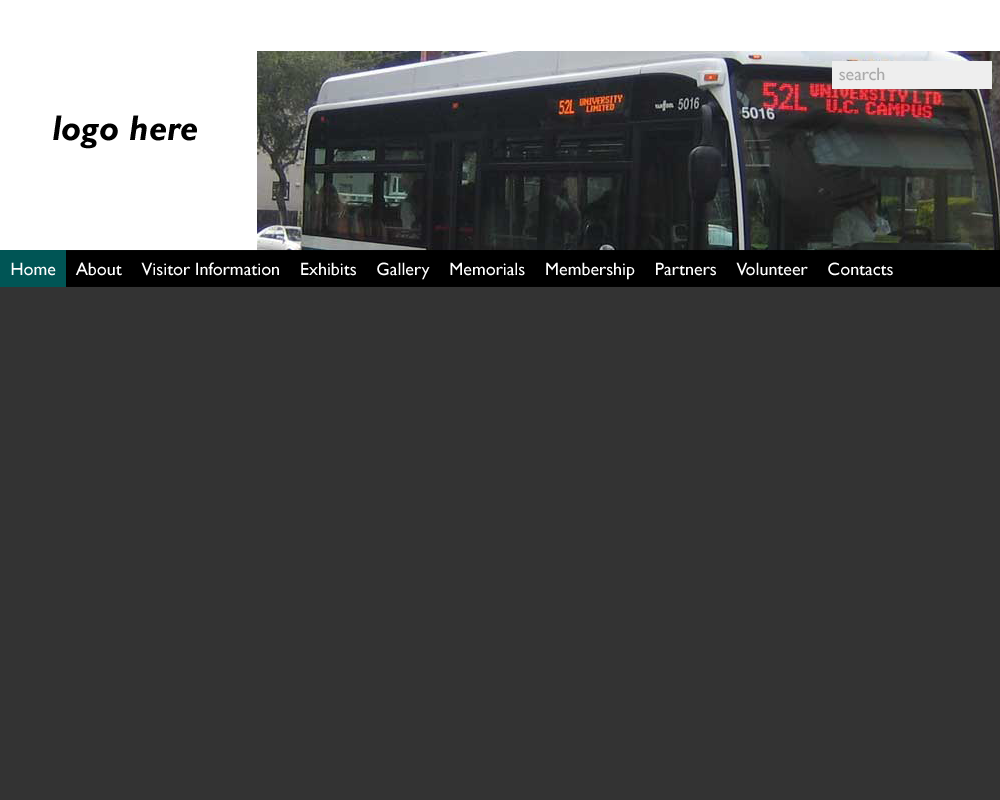
<style>
.page{position:relative;width:1000px;height:800px;background:#333333}
.page>*{position:absolute;margin:0}
.t1{font:17.9px "GillSansMT";color:#aaaaaa}
.t2{font:35.9px "GillSansMT-BoldItalic";color:#000000}
.t3{font:17.9px "GillSansMT";color:#ffffff}
</style>
<div class="page">
<p class="t1" style="left:839px;top:67px;width:46px;height:14px">search</p>
<p class="t2" style="left:53px;top:115px;width:144px;height:34px">logo here</p>
<p class="t3" style="left:11px;top:262px;width:882px;height:18px">Home    About    Visitor Information    Exhibits    Gallery    Memorials    Membership    Partners    Volunteer    Contacts</p>
</div>
